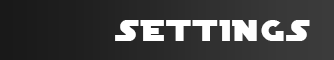
<style>
.page{position:relative;width:334px;height:60px}
.page>*{position:absolute;margin:0}
.t1{font:31px "SFDistantGalaxyAlternate";letter-spacing:0.12em;color:#ffffff}
</style>
<div class="page">
<p class="t1" style="left:115px;top:20px;width:195px;height:21px">SETTINGS</p>
</div>
